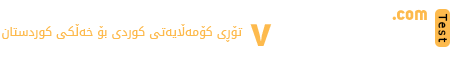
<style>
.page{position:relative;width:450px;height:60px;background:#ffffff}
.page>*{position:absolute;margin:0}
.t1{font:18.4px "Uni-Sans-Bold";color:#fdba4d}
.t2{font:11px "Tahoma";color:#000000;font-weight:bold}
.t3{font:12px "DroidArabicKufi";color:#fdba4d}
.t4{font:41.2px "Uni-Sans-Bold";color:#fdba4d}
</style>
<div class="page">
<p class="t1" style="left:392px;top:9px;width:35px;height:11px">.com</p>
<p class="t2" style="left:438px;top:13px;width:10px;height:30px;rotate:90deg">Test</p>
<p class="t3" style="left:2px;top:24px;width:241px;height:18px">تۆڕی کۆمەڵایەتی کوردی بۆ خەڵکی کوردستان</p>
<p class="t4" style="left:250px;top:24px;width:22px;height:22px">v</p>
</div>
